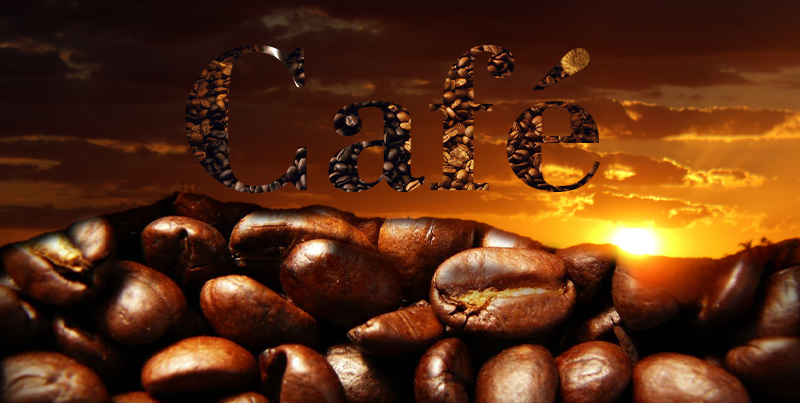
<style>
.page{position:relative;width:800px;height:403px}
.page>*{position:absolute;margin:0}
.t1{font:219.3px "BodoniBT-Bold"}
</style>
<div class="page">
<p class="t1" style="left:185px;top:45px;width:416px;height:148px">Café</p>
</div>
